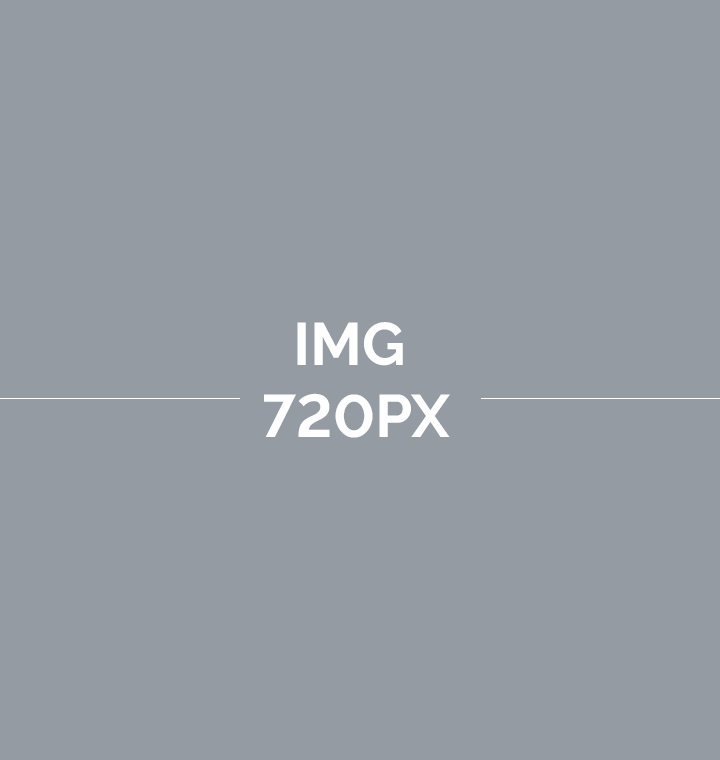
<style>
.page{position:relative;width:720px;height:760px;background:#959ba3}
.page>*{position:absolute;margin:0}
.t1{font:60px/15px "Raleway-Bold";color:#fefefe;text-transform:uppercase}
.t2{font:60px "Raleway-Bold";color:#fefefe}
.t3{font:60px "Raleway-Bold";color:#fefefe;text-transform:uppercase}
</style>
<div class="page">
<p class="t1" style="left:264px;top:322px;width:186px;height:116px;text-align:center">IMG <br><span class="t2">720</span><span class="t3">PX</span></p>
</div>
